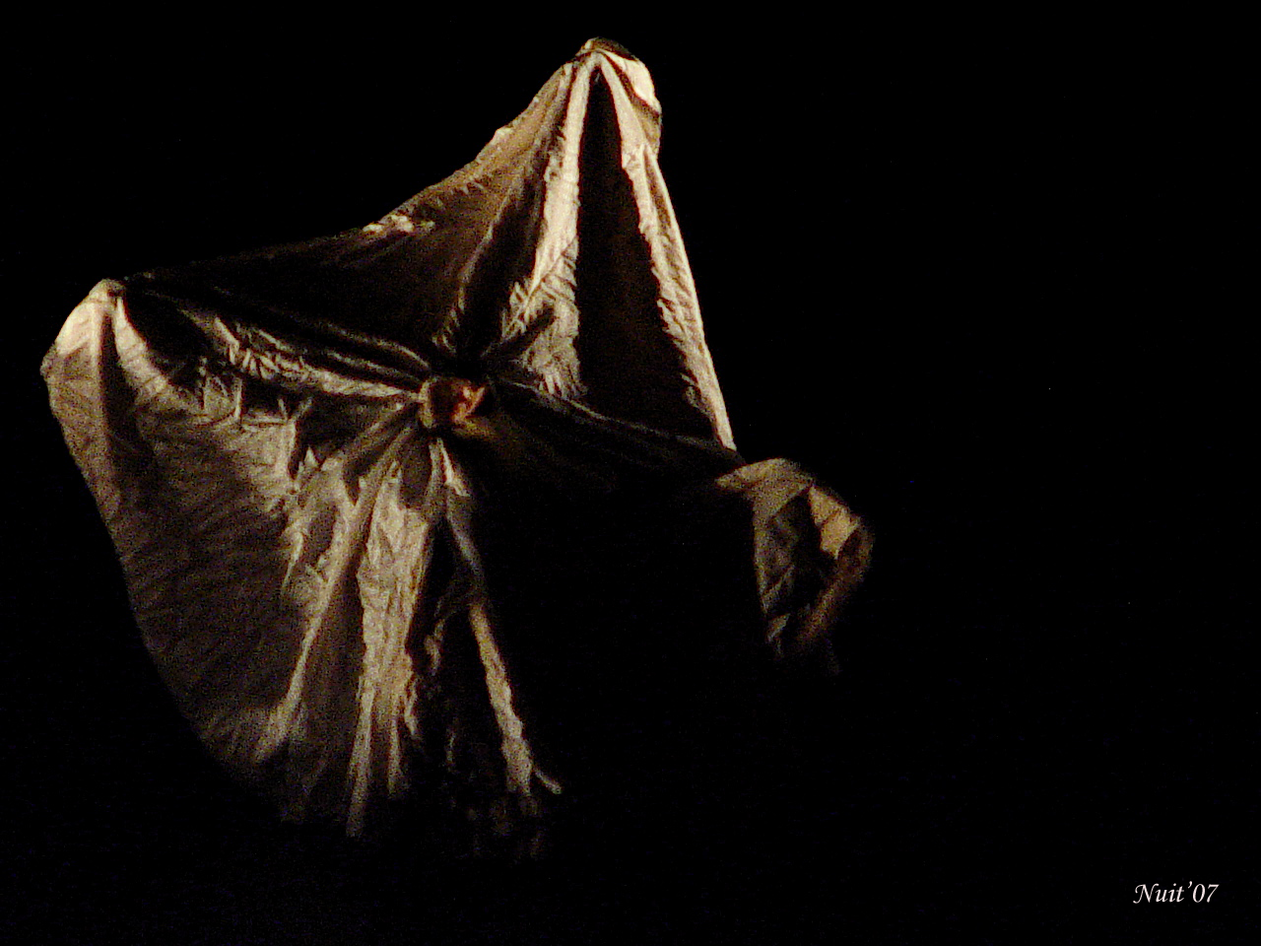
<style>
.page{position:relative;width:1261px;height:946px;background:#000000}
.page>*{position:absolute;margin:0}
.t1{font:29.6px "MonotypeCorsiva";color:#efdfdf}
.t2{font:29.6px "MonotypeCorsiva";color:#000000}
</style>
<div class="page">
<p class="t1" style="left:1133px;top:881px;width:87px;height:22px"><span class="t2">    </span>Nuit’07</p>
</div>
